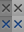
<style>
.page{position:relative;width:24px;height:32px}
.page>*{position:absolute;margin:0}
.t1{font:12px "KozGoPr6N-Bold";color:#505050}
.t2{font:12px "KozGoPr6N-Bold";color:#153c76}
</style>
<div class="page">
<p class="t1" style="left:2px;top:4px;width:8px;height:8px">×</p>
<p class="t1" style="left:14px;top:4px;width:8px;height:8px">×</p>
<p class="t2" style="left:2px;top:20px;width:8px;height:8px">×</p>
<p class="t2" style="left:14px;top:20px;width:8px;height:8px">×</p>
</div>
